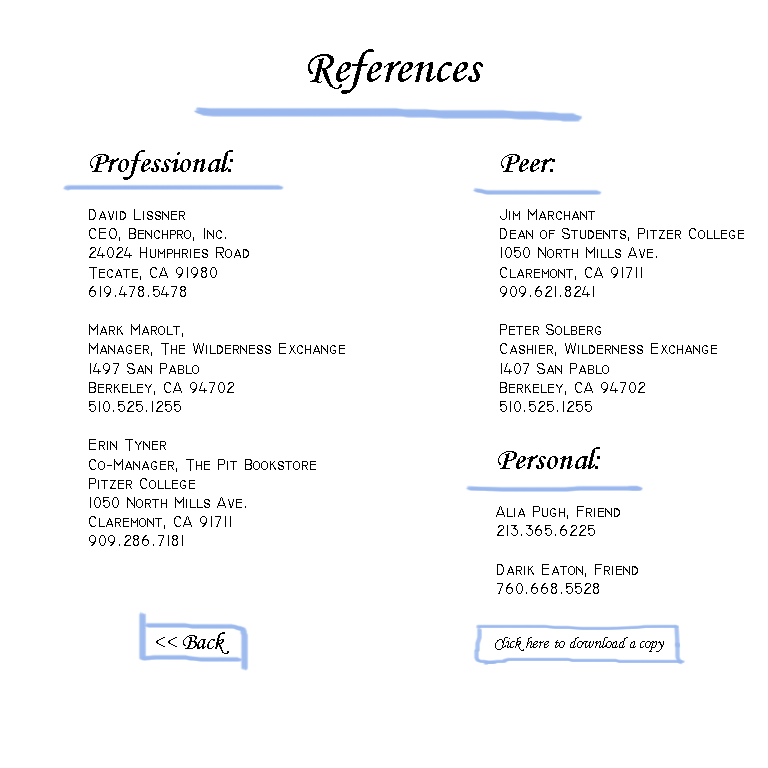
<style>
.page{position:relative;width:768px;height:768px;background:#ffffff}
.page>*{position:absolute;margin:0}
.t1{font:48px "MonotypeCorsiva";color:#000000}
.t2{font:16px "TechnicBold";color:#000000}
.t3{font:32px "MonotypeCorsiva";color:#000000}
.t4{font:24px "MonotypeCorsiva";color:#000000}
.t5{font:16px "MonotypeCorsiva";color:#000000}
</style>
<div class="page">
<p class="t1" style="left:308px;top:49px;width:175px;height:45px">References</p>
<p class="t2" style="left:89px;top:150px;width:256px;height:396px"><span class="t3">Professional:<br> <br></span>David Lissner<br>CEO, Benchpro, Inc.<br>24024 Humphries Road<br>Tecate, CA 91980<br>619.478.5478<br><br>Mark Marolt,<br>Manager, The Wilderness Exchange<br>1497 San Pablo<br>Berkeley, CA 94702<br>510.525.1255<br><br>Erin Tyner<br>Co-Manager, The Pit Bookstore<br>Pitzer College<br>1050 North Mills Ave.<br>Claremont, CA 91711<br>909.286.7181</p>
<p class="t2" style="left:500px;top:154px;width:244px;height:258px"><span class="t3">Peer:<br> <br></span>Jim Marchant<br>Dean of Students, Pitzer College<br>1050 North Mills Ave.<br>Claremont, CA 91711<br>909.621.8241<br><br>Peter Solberg<br>Cashier, Wilderness Exchange<br>1407 San Pablo<br>Berkeley, CA 94702<br>510.525.1255</p>
<p class="t2" style="left:496px;top:447px;width:142px;height:147px"><span class="t3">Personal:<br> </span><br>Alia Pugh, Friend<br>213.365.6225<br><br>Darik Eaton, Friend<br>760.668.5528</p>
<p class="t4" style="left:156px;top:632px;width:73px;height:22px">&lt;&lt; Back</p>
<p class="t5" style="left:495px;top:637px;width:169px;height:15px">Click here to download a copy</p>
</div>
